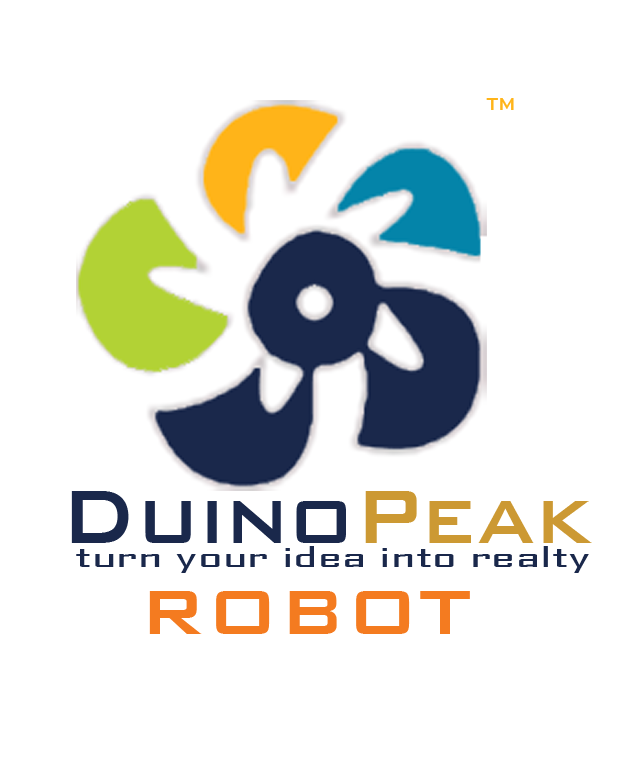
<style>
.page{position:relative;width:634px;height:780px;background:#ffffff}
.page>*{position:absolute;margin:0}
.t1{font:23.2px "BankGothicBT-Medium";color:#ffb419;scale:0.8 1}
.t2{font:100.1px "BankGothicBT-Medium";color:#1a284b;scale:0.9 1}
.t3{font:100.1px "BankGothicBT-Medium";color:#cc9933;scale:0.9 1}
.t4{font:27.7px "AgencyFB-Reg";color:#1a284b;scale:2.35 1}
.t5{font:83.3px "BankGothicBT-Medium";color:#f47b20}
</style>
<div class="page">
<p class="t1" style="left:486px;top:98px;width:28px;height:12px">TM</p>
<p class="t2" style="left:71px;top:491px;width:521px;height:52px">Duino<span class="t3">Peak</span></p>
<p class="t4" style="left:76px;top:546px;width:513px;height:27px">turn your idea into realty</p>
<p class="t5" style="left:149px;top:591px;width:321px;height:43px">ROBOT</p>
</div>
